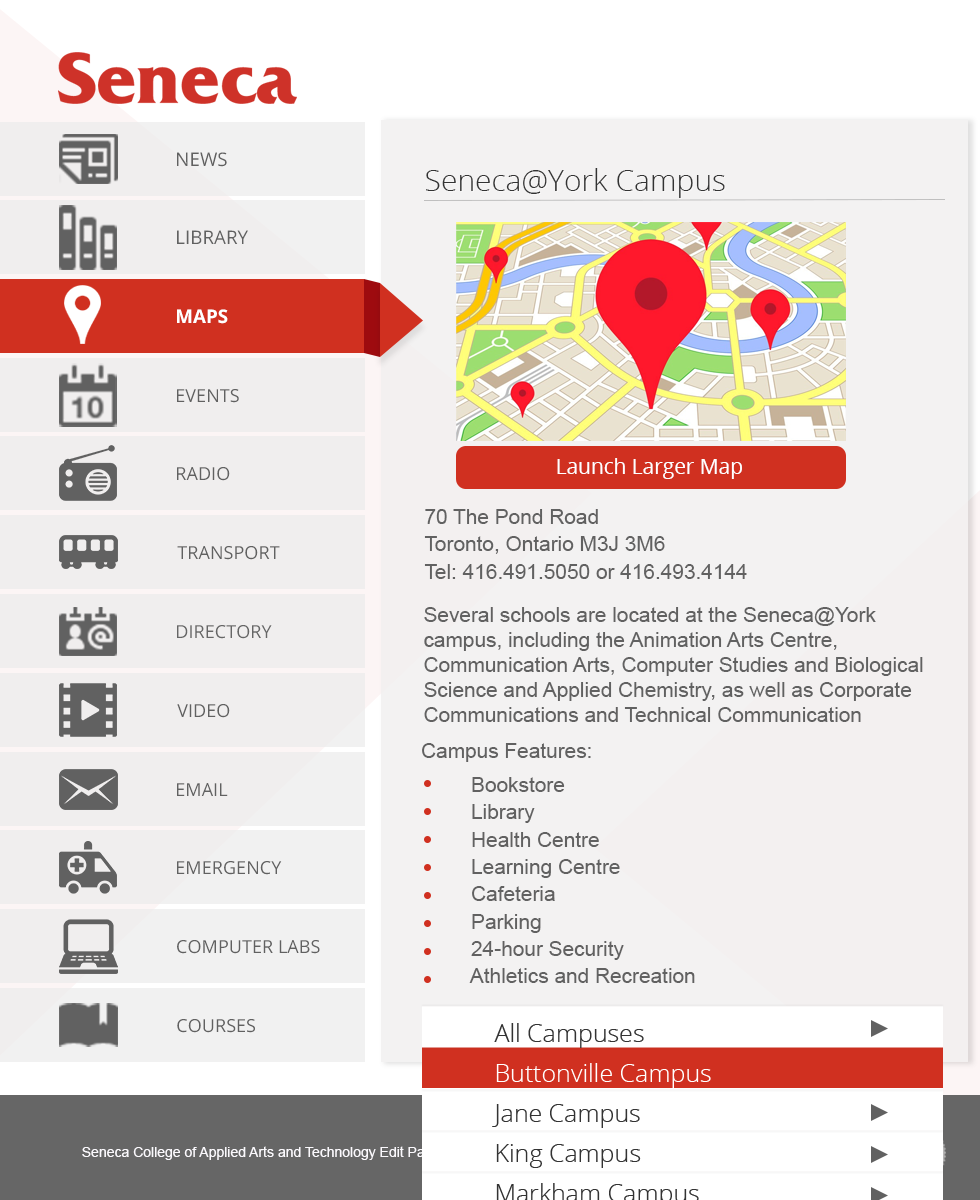
<style>
.page{position:relative;width:980px;height:1200px;background:#f3f2f2}
.page>*{position:absolute;margin:0}
.t1{font:30px "OpenSans-Light";color:#333333}
.t2{font:20.8px "OpenSans";color:#ffffff}
.t3{font:20.8px/25px "ArialMT";color:#616161}
.t4{font:20.8px "ArialMT";color:#616161}
</style>
<div class="page">
<p class="t1" style="left:426px;top:168px;width:299px;height:30px">Seneca@York Campus</p>
<p class="t2" style="left:557px;top:458px;width:185px;height:21px">Launch Larger Map</p>
<p class="t3" style="left:424px;top:509px;width:323px;height:70px">70 The Pond Road<br>Toronto, Ontario M3J 3M6<br>Tel: 416.491.5050 or 416.493.4144</p>
<p class="t3" style="left:424px;top:607px;width:499px;height:115px">Several schools are located at the Seneca@York campus, including the Animation Arts Centre, Communication Arts, Computer Studies and Biological Science and Applied Chemistry, as well as Corporate Communications and Technical Communication programs.</p>
<p class="t4" style="left:422px;top:743px;width:169px;height:19px">Campus Features:</p>
<p class="t3" style="left:469px;top:777px;width:226px;height:206px">Bookstore<br>   Library<br>   Health Centre<br>   Learning Centre<br>   Cafeteria<br>   Parking<br>   24-hour Security<br>   Athletics and Recreation</p>
</div>
